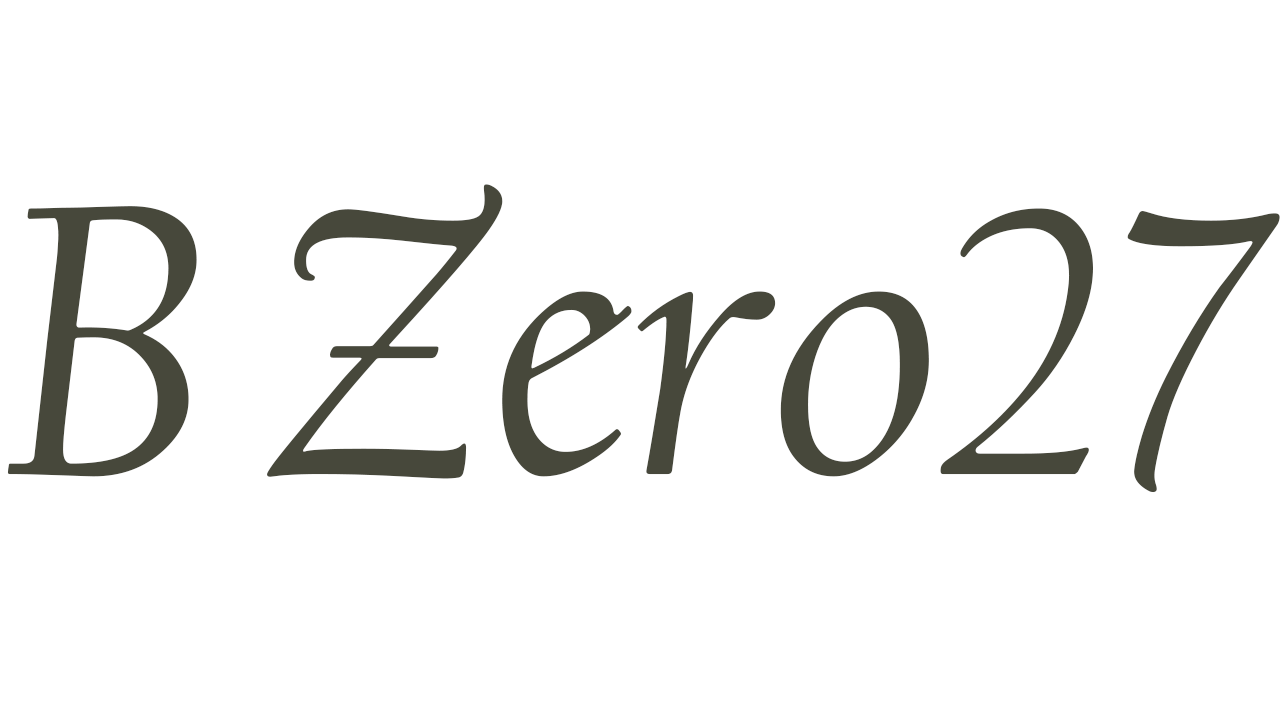
<style>
.page{position:relative;width:1280px;height:720px;background:#ffffff}
.page>*{position:absolute;margin:0}
.t1{font:401.5px "CalifornianFB-Italic";color:#47483b}
</style>
<div class="page">
<p class="t1" style="left:7px;top:184px;width:1273px;height:309px">B Zero27</p>
</div>
